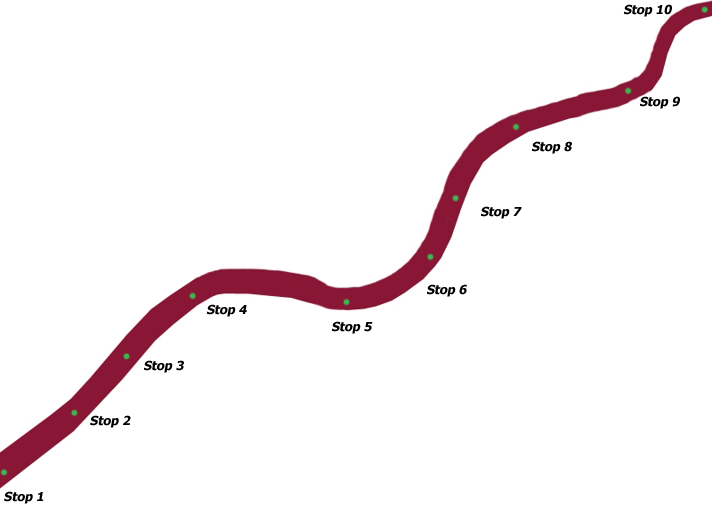
<style>
.page{position:relative;width:712px;height:514px;background:#ffffff}
.page>*{position:absolute;margin:0}
.t1{font:12.5px "Tahoma-Bold";color:#000000;font-style:italic}
</style>
<div class="page">
<p class="t1" style="left:623px;top:4px;width:49px;height:13px">Stop 10</p>
<p class="t1" style="left:639px;top:96px;width:41px;height:13px">Stop 9</p>
<p class="t1" style="left:531px;top:141px;width:41px;height:13px">Stop 8</p>
<p class="t1" style="left:480px;top:206px;width:42px;height:13px">Stop 7</p>
<p class="t1" style="left:426px;top:284px;width:41px;height:13px">Stop 6</p>
<p class="t1" style="left:206px;top:304px;width:41px;height:13px">Stop 4</p>
<p class="t1" style="left:331px;top:321px;width:42px;height:13px">Stop 5</p>
<p class="t1" style="left:143px;top:360px;width:41px;height:13px">Stop 3</p>
<p class="t1" style="left:90px;top:415px;width:41px;height:13px">Stop 2</p>
<p class="t1" style="left:4px;top:491px;width:40px;height:13px">Stop 1</p>
</div>
